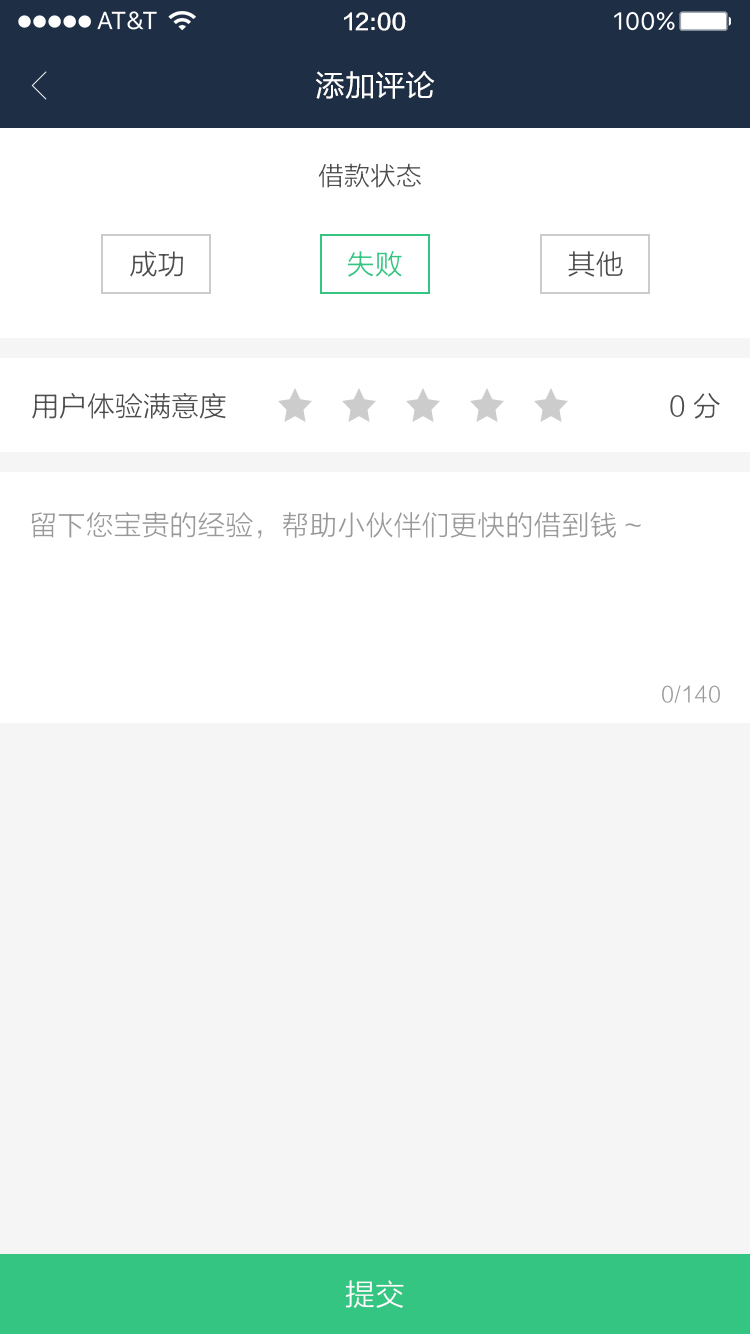
<style>
.page{position:relative;width:750px;height:1334px;background:#f5f5f5}
.page>*{position:absolute;margin:0}
.t1{font:22px "FZLTZHK--GBK1-0";color:#ffffff}
.t2{font:30px "FZLTHJW--GB1-0";color:#ffffff}
.t3{font:26px "FZLTXHK";color:#4d4d4d}
.t4{font:28px "FZLTXHK";color:#4d4d4d}
.t5{font:28px "FZLTXHK";color:#35c583}
.t6{font:28px "FZLTXHK";color:#999999}
.t7{font:22px "FZLTXHK";color:#999999}
.t8{font:30px "FZLTXHK";color:#ffffff}
</style>
<div class="page">
<p class="t1" style="left:344px;top:12px;width:62px;height:19px">12:00</p>
<p class="t2" style="left:316px;top:71px;width:119px;height:28px">添加评论</p>
<p class="t3" style="left:318px;top:163px;width:103px;height:25px">借款状态</p>
<p class="t4" style="left:130px;top:251px;width:53px;height:26px">成功</p>
<p class="t5" style="left:347px;top:251px;width:55px;height:26px">失败</p>
<p class="t4" style="left:568px;top:251px;width:55px;height:26px">其他</p>
<p class="t4" style="left:32px;top:392px;width:194px;height:27px">用户体验满意度</p>
<p class="t4" style="left:670px;top:393px;width:50px;height:26px">0分</p>
<p class="t6" style="left:31px;top:512px;width:610px;height:27px">留下您宝贵的经验，帮助小伙伴们更快的借到钱~</p>
<p class="t7" style="left:662px;top:685px;width:58px;height:18px">0/140</p>
<p class="t8" style="left:345px;top:1280px;width:59px;height:28px">提交</p>
</div>
